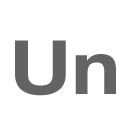
<style>
.page{position:relative;width:128px;height:128px;background:#ffffff}
.page>*{position:absolute;margin:0}
.t1{font:75px "HelveticaNeue-Bold";color:#636363;scale:1.11 1}
</style>
<div class="page">
<p class="t1" style="left:15px;top:40px;width:101px;height:56px">Un</p>
</div>
